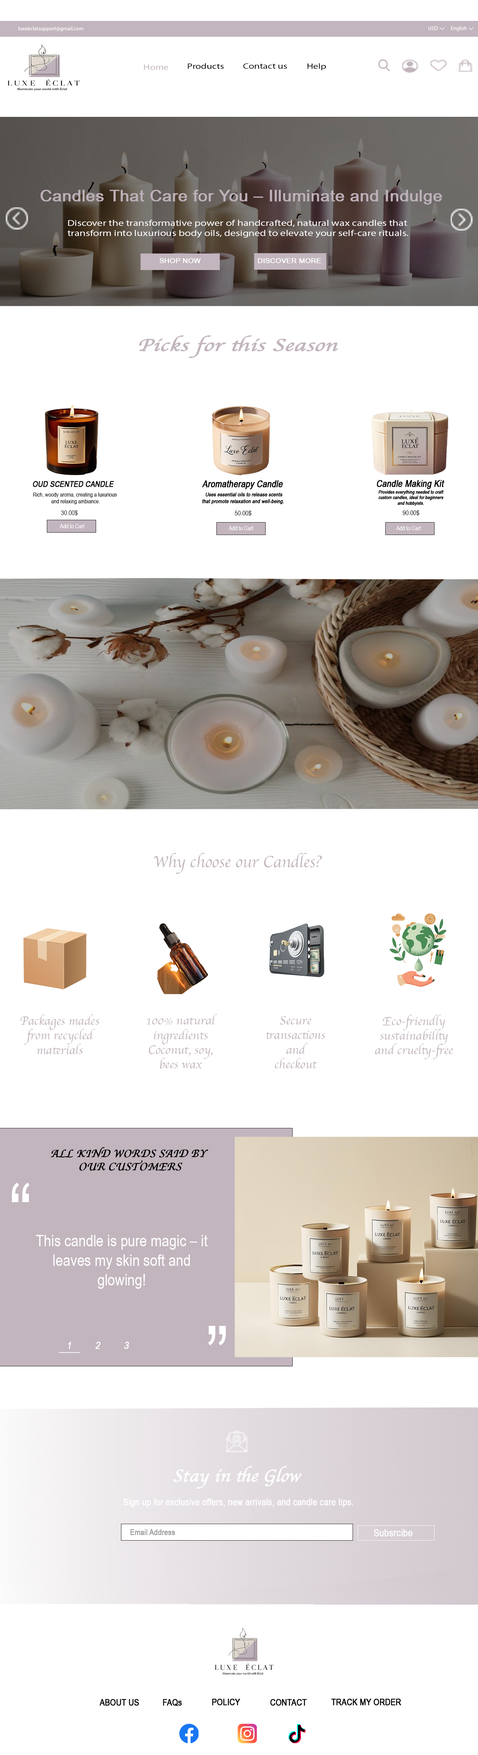
<style>
.page{position:relative;width:478px;height:1755px;background:#ffffff}
.page>*{position:absolute;margin:0}
.t1{font:5.4px "MyriadPro-Regular";color:#fefefe}
.t2{font:5.4px "MyriadPro-Regular";color:#ffffff}
.t3{font:7.8px "MyriadPro-Regular";color:#c2b5be;scale:1.27 1}
.t4{font:7.8px "MyriadPro-Regular";color:#000000;scale:1.27 1}
.t5{font:15.9px "ArialNarrow";color:#beb1ba;font-weight:bold;scale:1.27 1}
.t6{font:8.6px "MyriadPro-Regular";color:#fffeff;scale:1.27 1}
.t7{font:6.9px "ArialNarrow";color:#fefefe;font-weight:bold;scale:1.27 1}
.t8{font:17.6px "Apple-Chancery";color:#c2b5be;font-weight:bold;font-style:italic;scale:1.27 1}
.t9{font:8.1px "ArialNarrow";color:#000000;font-weight:bold;font-style:italic}
.t10{font:9.4px "ArialNarrow";color:#000000;font-weight:bold;font-style:italic}
.t11{font:5.8px "ArialNarrow";color:#000000}
.t12{font:5.4px "ArialNarrow";color:#000000;font-weight:bold;font-style:italic}
.t13{font:4.7px "ArialNarrow";color:#000000;font-weight:bold;font-style:italic}
.t14{font:6.7px "ArialNarrow";color:#000000}
.t15{font:5.9px "ArialNarrow";color:#ffffff}
.t16{font:16.4px "Apple-Chancery";color:#c2b5be}
.t17{font:12.1px "Apple-Chancery";color:#c2b5be}
.t18{font:10.8px "Apple-Chancery";color:#000000;font-weight:bold;font-style:italic}
.t19{font:84.3px "ArialNarrow";color:#ffffff}
.t20{font:16.2px "ArialNarrow";color:#ffffff}
.t21{font:10.1px "ArialNarrow";color:#ffffff;font-weight:bold;font-style:italic}
.t22{font:17.6px "Apple-Chancery";color:#ffffff;font-weight:bold;font-style:italic}
.t23{font:9.4px "ArialNarrow";color:#ffffff;font-weight:bold}
.t24{font:8.1px "ArialNarrow";color:#9b9999;font-weight:bold}
.t25{font:10.1px "ArialNarrow";color:#ffffff;font-weight:bold}
.t26{font:9px "ArialNarrow";color:#000000;font-weight:bold}
</style>
<div class="page">
<p class="t1" style="left:19px;top:26px;width:64px;height:5px">luxeéclatsupport@gmail.com</p>
<p class="t2" style="left:428px;top:26px;width:10px;height:4px">USD</p>
<p class="t2" style="left:451px;top:26px;width:15px;height:5px">English</p>
<p class="t3" style="left:144px;top:64px;width:24px;height:6px">Home</p>
<p class="t4" style="left:188px;top:63px;width:36px;height:6px">Products</p>
<p class="t4" style="left:243px;top:63px;width:44px;height:6px">Contact us</p>
<p class="t4" style="left:307px;top:63px;width:19px;height:7px">Help</p>
<p class="t5" style="left:40px;top:190px;width:402px;height:15px">Candles That Care for You – Illuminate and Indulge</p>
<p class="t6" style="left:67px;top:220px;width:341px;height:18px">Discover the transformative power of handcrafted, natural wax candles that transform into luxurious body oils, designed to elevate your self-care rituals.</p>
<p class="t7" style="left:159px;top:258px;width:42px;height:5px">SHOP NOW</p>
<p class="t7" style="left:258px;top:258px;width:63px;height:5px">DISCOVER MORE</p>
<p class="t8" style="left:139px;top:335px;width:199px;height:23px">Picks for this Season</p>
<p class="t9" style="left:33px;top:481px;width:81px;height:6px">OUD SCENTED CANDLE</p>
<p class="t10" style="left:202px;top:480px;width:81px;height:9px">Aromatherapy Candle</p>
<p class="t10" style="left:377px;top:480px;width:67px;height:9px">Candle Making Kit</p>
<p class="t11" style="left:33px;top:492px;width:84px;height:12px;text-align:center">Rich, woody aroma, creating a luxurious <br>and relaxing ambiance.</p>
<p class="t12" style="left:202px;top:492px;width:82px;height:12px;text-align:center">Uses essential oils to release scents that promote relaxation and well-being.</p>
<p class="t13" style="left:379px;top:490px;width:65px;height:16px;text-align:center">Provides everything needed to craft custom candles, ideal for beginners and hobbyists.</p>
<p class="t14" style="left:61px;top:510px;width:17px;height:6px">30.00$</p>
<p class="t14" style="left:402px;top:510px;width:17px;height:6px">90.00$</p>
<p class="t14" style="left:235px;top:510px;width:16px;height:6px">50.00$</p>
<p class="t15" style="left:60px;top:524px;width:25px;height:4px">Add to Cart</p>
<p class="t15" style="left:229px;top:526px;width:24px;height:4px">Add to Cart</p>
<p class="t15" style="left:396px;top:526px;width:25px;height:4px">Add to Cart</p>
<p class="t16" style="left:154px;top:853px;width:168px;height:21px">Why choose our Candles?</p>
<p class="t17" style="left:147px;top:1014px;width:70px;height:54px;text-align:center">100% natural ingredients <br>Coconut, soy, bees wax</p>
<p class="t17" style="left:21px;top:1014px;width:78px;height:40px;text-align:center">Packages mades from recycled materials</p>
<p class="t17" style="left:266px;top:1016px;width:59px;height:52px;text-align:center">Secure transactions and checkout</p>
<p class="t17" style="left:375px;top:1015px;width:78px;height:44px;text-align:center">Eco-friendly sustainability and cruelty-free</p>
<p class="t18" style="left:51px;top:1147px;width:157px;height:24px;text-align:center">ALL KIND WORDS SAID BY<br> OUR CUSTOMERS</p>
<p class="t19" style="left:12px;top:1182px;width:18px;height:20px">“</p>
<p class="t20" style="left:36px;top:1235px;width:172px;height:54px;text-align:center">This candle is pure magic – it leaves my skin soft and glowing!</p>
<p class="t19" style="left:208px;top:1326px;width:18px;height:19px;rotate:180deg">“</p>
<p class="t21" style="left:68px;top:1341px;width:3px;height:8px">1</p>
<p class="t21" style="left:95px;top:1341px;width:5px;height:8px">2</p>
<p class="t21" style="left:124px;top:1341px;width:5px;height:8px">3</p>
<p class="t22" style="left:173px;top:1466px;width:129px;height:22px">Stay in the Glow</p>
<p class="t23" style="left:123px;top:1498px;width:230px;height:9px">Sign up for exclusive offers, new arrivals, and candle care tips.</p>
<p class="t24" style="left:130px;top:1529px;width:45px;height:6px">Email Address</p>
<p class="t25" style="left:374px;top:1529px;width:39px;height:7px">Subsrcibe</p>
<p class="t26" style="left:99px;top:1699px;width:40px;height:7px">ABOUT US</p>
<p class="t26" style="left:163px;top:1699px;width:19px;height:7px">FAQs</p>
<p class="t26" style="left:212px;top:1698px;width:28px;height:7px">POLICY</p>
<p class="t26" style="left:270px;top:1699px;width:37px;height:7px">CONTACT</p>
<p class="t26" style="left:331px;top:1698px;width:70px;height:7px">TRACK MY ORDER</p>
</div>
